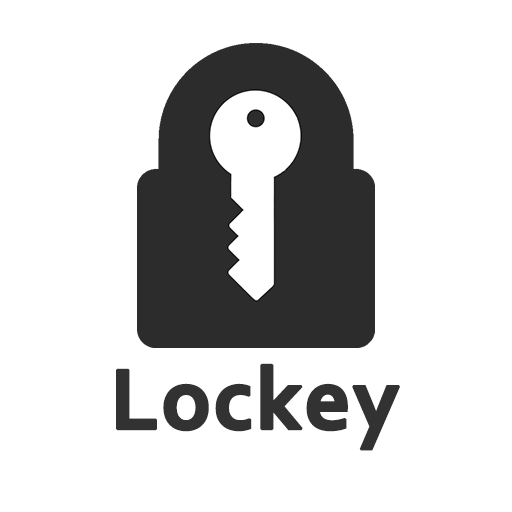
<style>
.page{position:relative;width:512px;height:512px;background:#ffffff}
.page>*{position:absolute;margin:0}
.t1{font:90px "Corbel-Bold";color:#323232;font-weight:bold}
</style>
<div class="page">
<p class="t1" style="left:116px;top:363px;width:284px;height:88px">Lockey</p>
</div>
